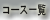
<style>
.page{position:relative;width:50px;height:20px}
.page>*{position:absolute;margin:0}
.t1{font:12px "MS-Gothic";color:#100f0f;scale:0.73 1}
</style>
<div class="page">
<p class="t1" style="left:3px;top:4px;width:43px;height:12px">コース一覧</p>
</div>
